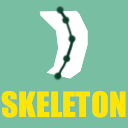
<style>
.page{position:relative;width:128px;height:128px;background:#78bea2}
.page>*{position:absolute;margin:0}
.t1{font:32.3px "Impact";color:#ffe500}
</style>
<div class="page">
<p class="t1" style="left:1px;top:91px;width:125px;height:27px">SKELETON</p>
</div>
